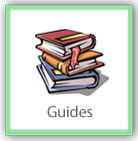
<style>
.page{position:relative;width:138px;height:141px;background:#ffffff}
.page>*{position:absolute;margin:0}
.t1{font:15.9px "MyriadPro-Regular";color:#615f5f}
</style>
<div class="page">
<p class="t1" style="left:47px;top:105px;width:46px;height:13px">Guides</p>
</div>
